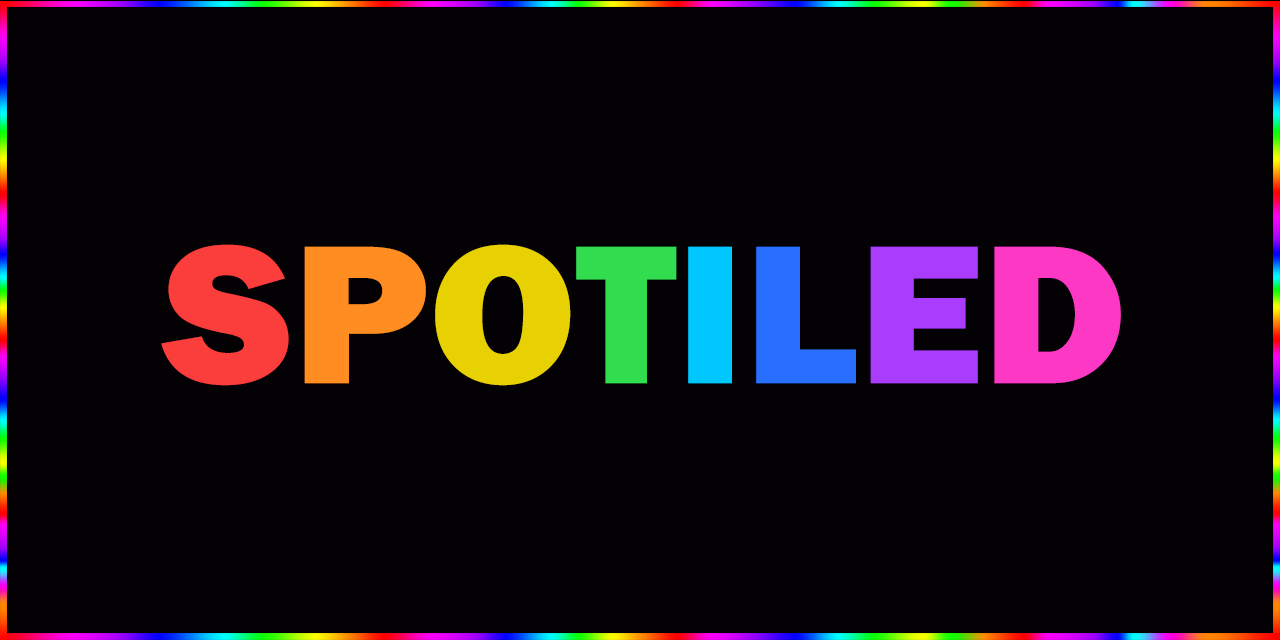
<style>
.page{position:relative;width:1280px;height:640px;background:#030104}
.page>*{position:absolute;margin:0}
.t1{font:350.4px "FranklinGothic-Heavy";color:#fb3d3b;scale:1.04 1}
.t2{font:350.4px "FranklinGothic-Heavy";color:#ff8d21;scale:1.04 1}
.t3{font:350.4px "FranklinGothic-Heavy";color:#e7d103;scale:1.04 1}
.t4{font:350.4px "FranklinGothic-Heavy";color:#32dc4f;scale:1.04 1}
.t5{font:350.4px "FranklinGothic-Heavy";color:#00c7fe;scale:1.04 1}
.t6{font:350.4px "FranklinGothic-Heavy";color:#286fff;scale:1.04 1}
.t7{font:350.4px "FranklinGothic-Heavy";color:#aa3cfd;scale:1.04 1}
.t8{font:350.4px "FranklinGothic-Heavy";color:#fd38c5;scale:1.04 1}
</style>
<div class="page">
<p class="t1" style="left:161px;top:244px;width:960px;height:142px">S<span class="t2">P</span><span class="t3">O</span><span class="t4">T</span><span class="t5">I</span><span class="t6">L</span><span class="t7">E</span><span class="t8">D</span></p>
</div>
